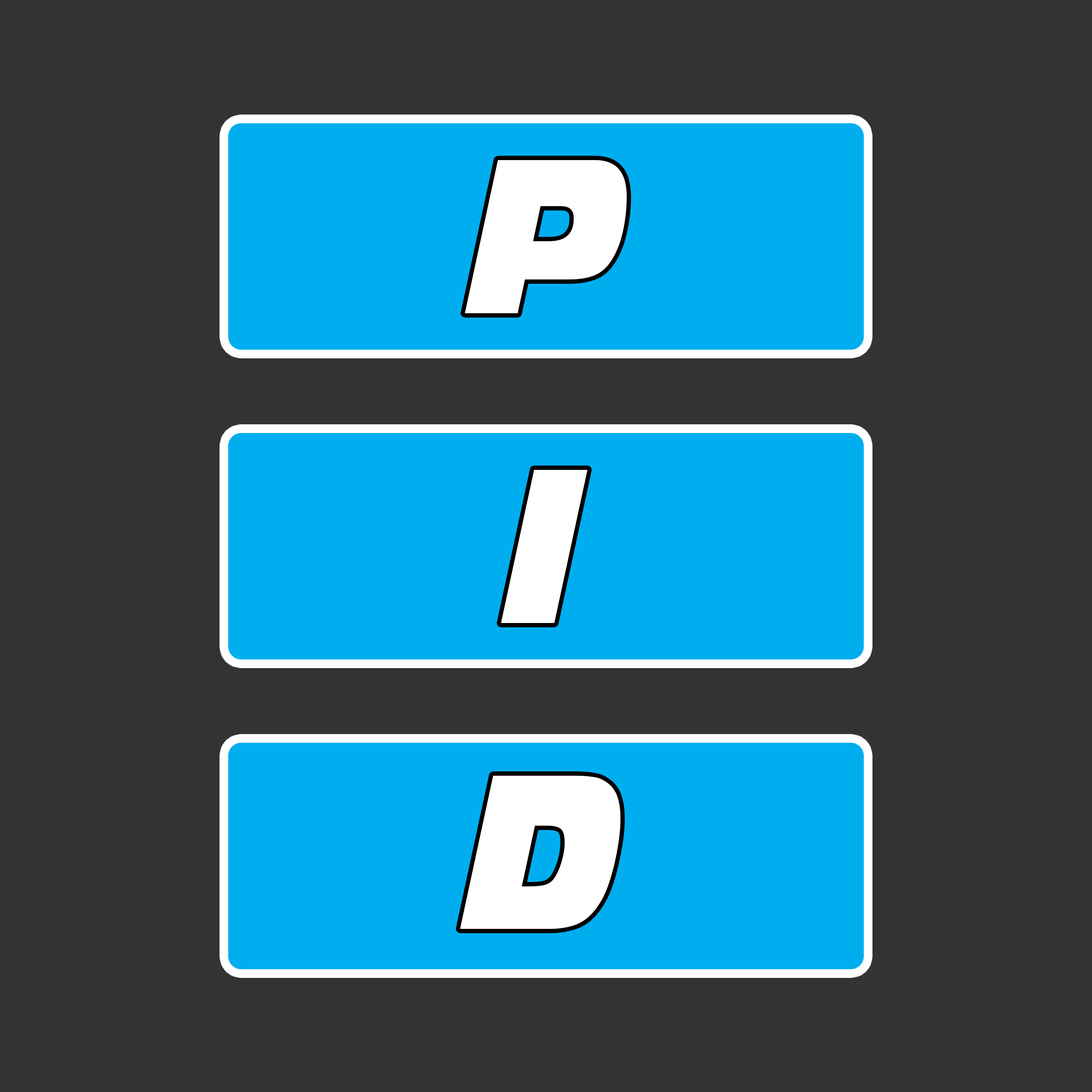
<style>
.page{position:relative;width:1092px;height:1092px;background:#333333}
.page>*{position:absolute;margin:0}
.t1{font:206.1px "Incised901BT-NordItalic";color:#ffffff;scale:0.81 1}
</style>
<div class="page">
<p class="t1" style="left:465px;top:160px;width:162px;height:153px">P</p>
<p class="t1" style="left:501px;top:470px;width:86px;height:153px">I</p>
<p class="t1" style="left:460px;top:776px;width:161px;height:153px">D</p>
</div>
